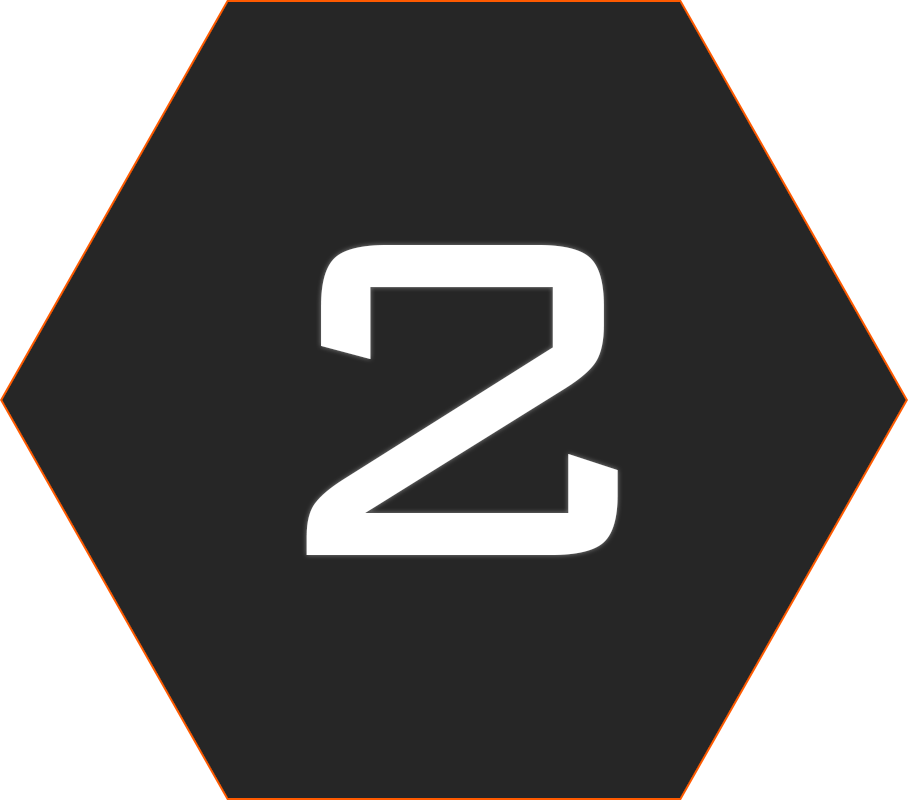
<style>
.page{position:relative;width:908px;height:800px;background:#262626}
.page>*{position:absolute;margin:0}
.t1{font:600px "BankGothicBT-Light";color:#ffffff}
</style>
<div class="page">
<p class="t1" style="left:306px;top:245px;width:312px;height:310px">2</p>
</div>
